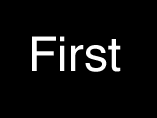
<style>
.page{position:relative;width:157px;height:118px;background:#000000}
.page>*{position:absolute;margin:0}
.t1{font:48px "Helvetica";color:#ffffff}
</style>
<div class="page">
<p class="t1" style="left:32px;top:36px;width:89px;height:36px">First</p>
</div>
